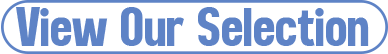
<style>
.page{position:relative;width:388px;height:54px;background:#ffffff}
.page>*{position:absolute;margin:0}
.t1{font:54.1px "Readfine-Regular";color:#5e83c6}
</style>
<div class="page">
<p class="t1" style="left:16px;top:7px;width:353px;height:39px">View Our Selection</p>
</div>
